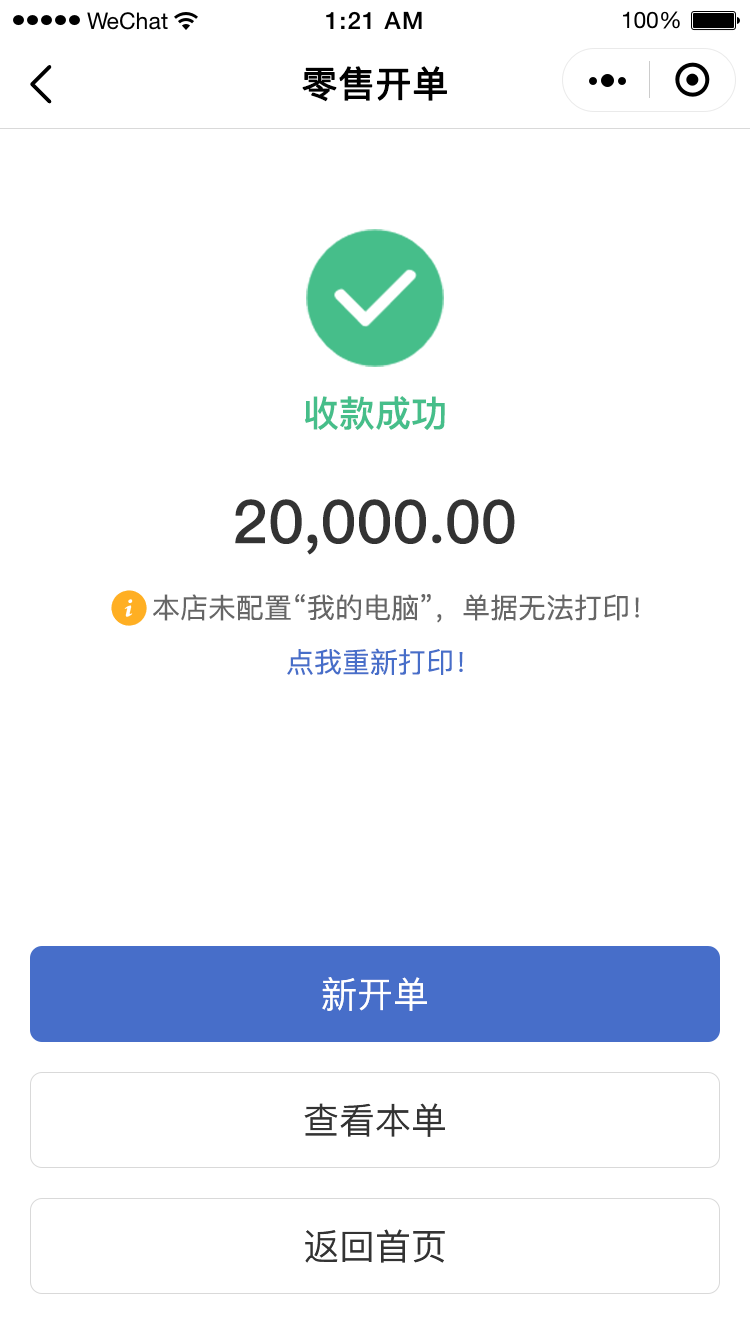
<style>
.page{position:relative;width:750px;height:1334px;background:#ffffff}
.page>*{position:absolute;margin:0}
.t1{font:36px "PingFang-SC-Medium";color:#000000;font-weight:bold}
.t2{font:36px "PingFang-SC-Bold";color:#46be8a}
.t3{font:60px "PingFang-SC-Bold";color:#333333}
.t4{font:28px "PingFang-SC-Medium";color:#666666}
.t5{font:28px "PingFang-SC-Medium";color:#476ec9}
.t6{font:36px "PingFang-SC-Medium";color:#ffffff}
.t7{font:36px "PingFang-SC-Medium";color:#333333}
</style>
<div class="page">
<p class="t1" style="left:302px;top:66px;width:145px;height:36px">零售开单</p>
<p class="t2" style="left:305px;top:396px;width:140px;height:34px">收款成功</p>
<p class="t3" style="left:235px;top:499px;width:280px;height:56px">20,000.00</p>
<p class="t4" style="left:153px;top:594px;width:486px;height:29px">本店未配置“我的电脑”，单据无法打印！</p>
<p class="t5" style="left:287px;top:648px;width:176px;height:27px">点我重新打印！</p>
<p class="t6" style="left:322px;top:977px;width:105px;height:34px">新开单</p>
<p class="t7" style="left:304px;top:1103px;width:141px;height:34px">查看本单</p>
<p class="t7" style="left:305px;top:1229px;width:140px;height:34px">返回首页</p>
</div>
